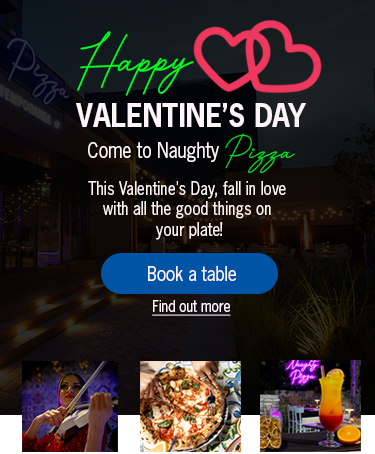
<style>
.page{position:relative;width:375px;height:454px}
.page>*{position:absolute;margin:0}
.t1{font:63px "QueenMother";color:#00ff1e;scale:0.9 1}
.t2{font:30.6px "NewsGothicStd-Bold";color:#fff5f8;scale:0.9 1}
.t3{font:20px "NewsGothicStd";color:#fff5f8;scale:0.9 1}
.t4{font:38px "QueenMother";color:#06df28;scale:0.9 1}
.t5{font:17px "NewsGothicStd";color:#fff5f8;scale:0.9 1}
.t6{font:19px "NewsGothicStd";color:#fff5f8;scale:0.9 1}
.t7{font:15px "NewsGothicStd";color:#fff5f8;text-decoration:underline;scale:0.9 1}
</style>
<div class="page">
<p class="t1" style="left:77px;top:31px;width:117px;height:65px;rotate:-2deg">Happy</p>
<p class="t2" style="left:76px;top:103px;width:230px;height:24px">VALENTINE’S DAY</p>
<p class="t3" style="left:88px;top:133px;width:207px;height:40px">Come to Naughty <span class="t4">Pizza</span></p>
<p class="t5" style="left:88px;top:181px;width:198px;height:59px;text-align:center">This Valentine's Day, fall in love <br>with all the good things on <br>your plate!</p>
<p class="t6" style="left:148px;top:266px;width:88px;height:15px">Book a table</p>
<p class="t7" style="left:152px;top:300px;width:79px;height:16px">Find out more</p>
</div>
